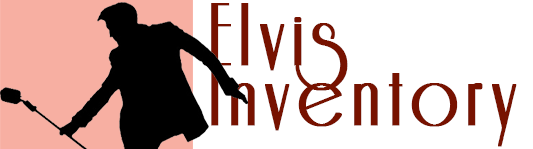
<style>
.page{position:relative;width:533px;height:149px;background:#ffffff}
.page>*{position:absolute;margin:0}
.t1{font:100px/60px "Riesling";letter-spacing:0.075em;color:#771200;font-weight:bold}
</style>
<div class="page">
<p class="t1" style="left:211px;top:3px;width:306px;height:144px">Elvis <br>Inventory</p>
</div>
